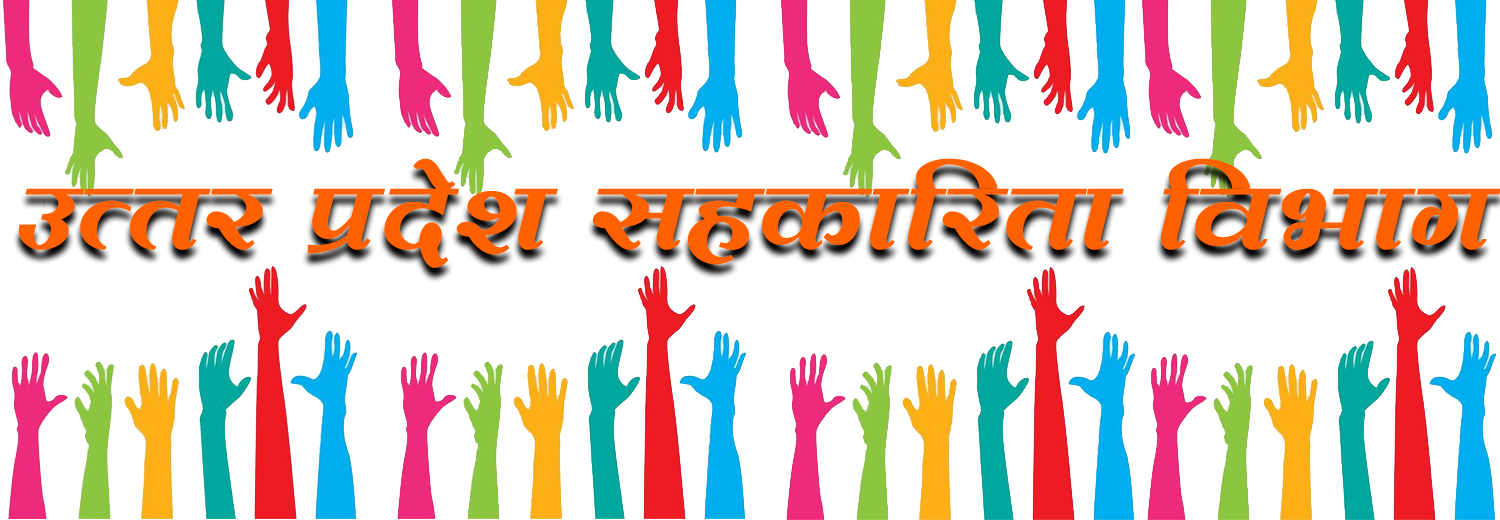
<style>
.page{position:relative;width:1500px;height:520px;background:#ffffff}
.page>*{position:absolute;margin:0}
.t1{font:120px "BHARTIYA-HINDI_089";color:#ff6101;font-weight:bold}
</style>
<div class="page">
<p class="t1" style="left:18px;top:158px;width:1483px;height:110px">mRrj izns'k lgdkfjrk foHkkx</p>
</div>
